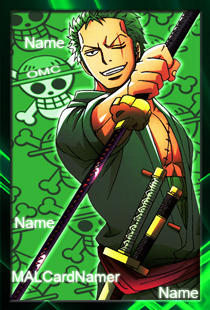
<style>
.page{position:relative;width:210px;height:310px}
.page>*{position:absolute;margin:0}
.t1{font:15px "ArialMT";color:#ffffff}
</style>
<div class="page">
<p class="t1" style="left:25px;top:37px;width:39px;height:11px">Name</p>
<p class="t1" style="left:15px;top:217px;width:39px;height:11px">Name</p>
<p class="t1" style="left:159px;top:287px;width:39px;height:11px">Name</p>
</div>
